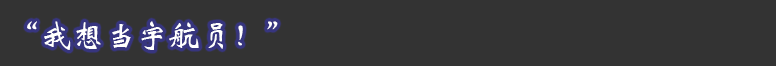
<style>
.page{position:relative;width:776px;height:66px;background:#333333}
.page>*{position:absolute;margin:0}
.t1{font:32px "STXinwei";color:#ffffff}
</style>
<div class="page">
<p class="t1" style="left:27px;top:21px;width:251px;height:29px">“我想当宇航员！”</p>
</div>
